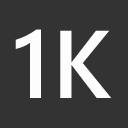
<style>
.page{position:relative;width:128px;height:128px;background:#333333}
.page>*{position:absolute;margin:0}
.t1{font:96px "SegoeUI-Semibold";letter-spacing:0.015em;color:#fdfdfd}
</style>
<div class="page">
<p class="t1" style="left:15px;top:29px;width:97px;height:69px">1K</p>
</div>
